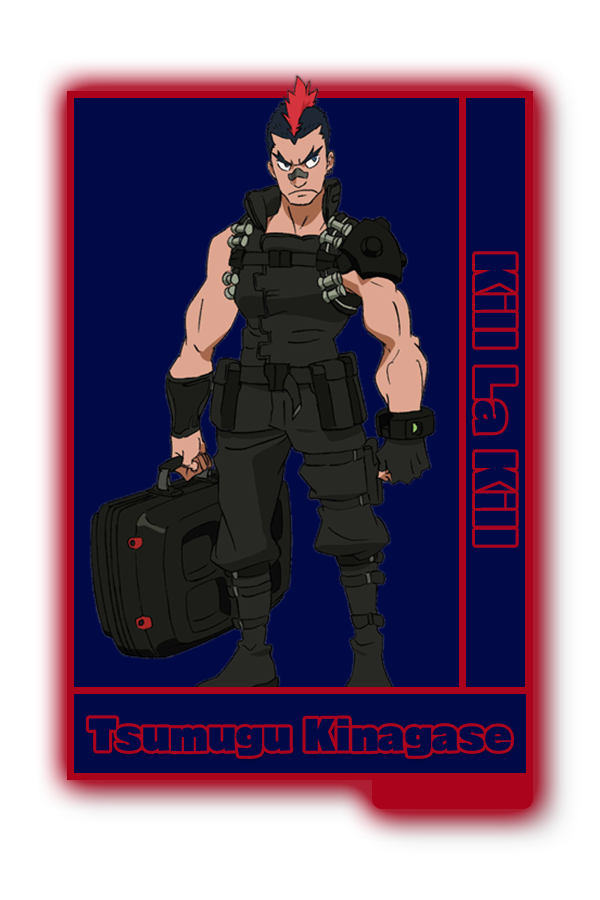
<style>
.page{position:relative;width:600px;height:900px;background:#010947}
.page>*{position:absolute;margin:0}
.t1{font:48.8px "RaglanPunchStd-UB";color:#010947}
.t2{font:38.3px "RaglanPunchStd-UB";color:#010947}
</style>
<div class="page">
<p class="t1" style="left:474px;top:254px;width:42px;height:291px;rotate:90deg">Kill La Kill</p>
<p class="t2" style="left:88px;top:718px;width:424px;height:38px">Tsumugu Kinagase</p>
</div>
